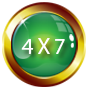
<style>
.page{position:relative;width:88px;height:88px;background:#ffffff}
.page>*{position:absolute;margin:0}
.t1{font:23px "MyriadPro-Regular";letter-spacing:-0.025em;color:#ffffff}
</style>
<div class="page">
<p class="t1" style="left:21px;top:38px;width:44px;height:16px">4 X 7</p>
</div>
